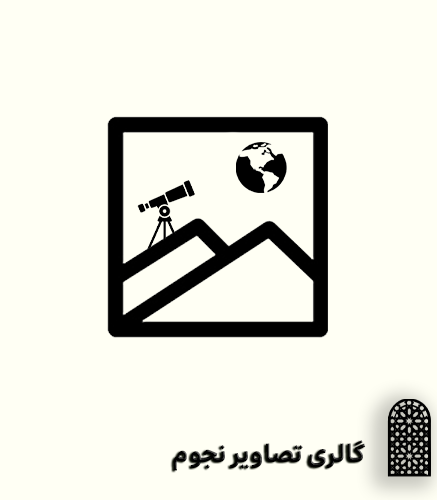
<style>
.page{position:relative;width:437px;height:500px;background:#fffff4}
.page>*{position:absolute;margin:0}
.t1{font:24px "Irancell-Bold";color:#000000}
</style>
<div class="page">
<p class="t1" style="left:173px;top:440px;width:193px;height:31px">گالری تصاویر نجوم</p>
</div>
